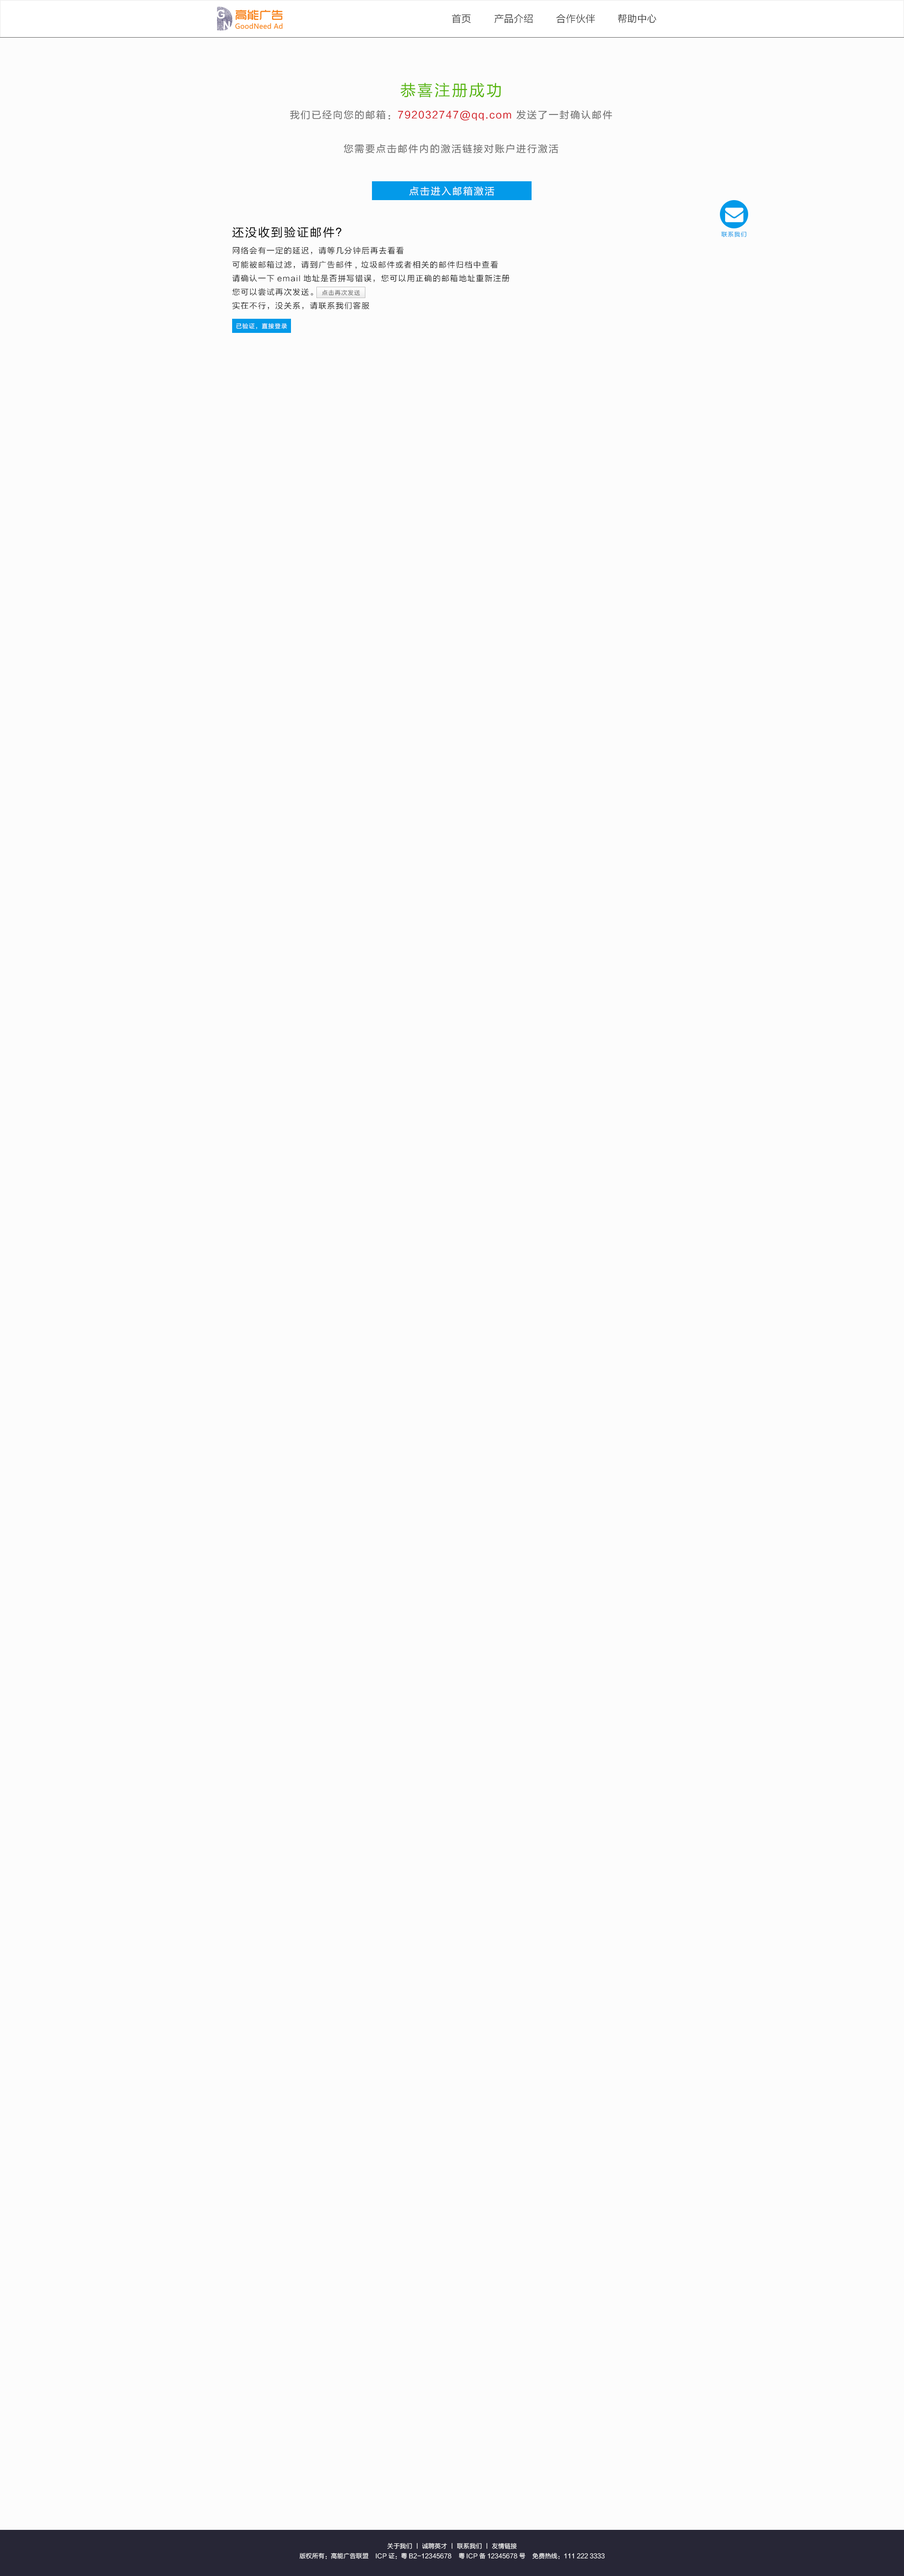
<style>
.page{position:relative;width:904px;height:2576px;background:#fcfcfc}
.page>*{position:absolute;margin:0}
.t1{font:9.8px "FZLTXHK";color:#333333}
.t2{font:9.8px "FZLTHK--GBK1-0";letter-spacing:0.1em;color:#666666}
.t3{font:15.7px "FZLTHK--GBK1-0";letter-spacing:0.1em;color:#54b506}
.t4{font:9.8px "FZLTHK--GBK1-0";letter-spacing:0.1em;color:#d1050f}
.t5{font:9.8px "FZLTHK--GBK1-0";letter-spacing:0.1em;color:#ffffff}
.t6{font:7.8px "FZLTXHK";letter-spacing:0.1em;color:#000000}
.t7{font:11.8px "FZLTHK--GBK1-0";letter-spacing:0.1em;color:#000000}
.t8{font:5.9px "FZLTXHK";letter-spacing:0.1em;color:#039ae9}
.t9{font:5.9px "FZLTXHK";letter-spacing:0.1em;color:#666666}
.t10{font:5.9px "FZLTXHK";letter-spacing:0.1em;color:#ffffff}
.t11{font:6.3px "FZLTXHK";color:#ffffff}
</style>
<div class="page">
<p class="t1" style="left:452px;top:14px;width:19px;height:10px">首页</p>
<p class="t1" style="left:494px;top:14px;width:39px;height:10px">产品介绍</p>
<p class="t1" style="left:556px;top:14px;width:39px;height:10px">合作伙伴</p>
<p class="t1" style="left:618px;top:14px;width:38px;height:10px">帮助中心</p>
<p class="t2" style="left:290px;top:82px;width:322px;height:71px;text-align:center"><span class="t3">恭喜注册成功<br></span>我们已经向您的邮箱：<span class="t4">792032747@qq.com</span> 发送了一封确认邮件<br><br>您需要点击邮件内的激活链接对账户进行激活</p>
<p class="t5" style="left:409px;top:186px;width:85px;height:10px">点击进入邮箱激活</p>
<p class="t6" style="left:232px;top:226px;width:277px;height:84px"><span class="t7">还没收到验证邮件？<br></span>网络会有一定的延迟，请等几分钟后再去看看<br>可能被邮箱过滤，请到广告邮件, 垃圾邮件或者相关的邮件归档中查看<br>请确认一下email地址是否拼写错误，您可以用正确的邮箱地址重新注册<br>您可以尝试再次发送。<br>实在不行，没关系，请联系我们客服</p>
<p class="t8" style="left:721px;top:231px;width:25px;height:6px">联系我们</p>
<p class="t9" style="left:322px;top:290px;width:38px;height:6px">点击再次发送</p>
<p class="t10" style="left:236px;top:323px;width:51px;height:6px">已验证，直接登录</p>
<p class="t11" style="left:387px;top:2543px;width:130px;height:6px">关于我们 丨 诚聘英才 丨 联系我们 丨 友情链接</p>
<p class="t11" style="left:299px;top:2552px;width:306px;height:7px">版权所有：高能广告联盟    ICP证：粤B2-12345678    粤ICP备12345678号    免费热线：111 222 3333</p>
</div>
